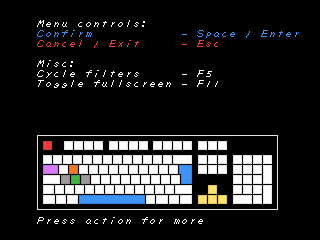
<style>
.page{position:relative;width:320px;height:240px;background:#000000}
.page>*{position:absolute;margin:0}
.t1{font:11px/10px "ZAPFont";color:#ffffff}
.t2{font:11px/10px "ZAPFont";color:#3e93f9}
.t3{font:11px/10px "ZAPFont";color:#f43939}
.t4{font:11px "ZAPFont";color:#ffffff}
</style>
<div class="page">
<p class="t1" style="left:37px;top:20px;width:262px;height:68px">Menu controls:<br><span class="t2">Confirm           - Space / Enter<br></span><span class="t3">Cancel / Exit     - Esc<br><br></span>Misc:<br>Cycle filters     - F5<br>Toggle fullscreen - F11</p>
<p class="t4" style="left:37px;top:217px;width:166px;height:7px">Press action for more</p>
</div>
